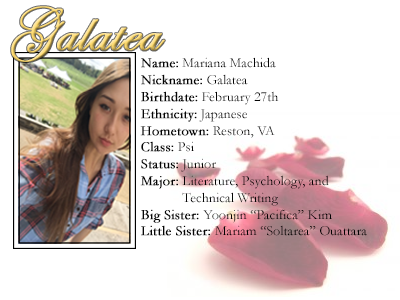
<style>
.page{position:relative;width:400px;height:300px;background:#ffffff}
.page>*{position:absolute;margin:0}
.t1{font:60px "EdwardianScriptITC";font-weight:bold}
.t2{font:14px "Garamond";color:#000000}
.t3{font:14px "Garamond";color:#000000;font-weight:bold}
.t4{font:14px "Garamond";color:#ffffff;font-weight:bold}
</style>
<div class="page">
<p class="t1" style="left:11px;top:6px;width:154px;height:56px">Galatea</p>
<p class="t2" style="left:140px;top:57px;width:227px;height:179px"><span class="t3">Name:</span> Mariana Machida<br><span class="t3">Nickname:</span> Galatea<br><span class="t3">Birthdate:</span> February 27th<br><span class="t3">Ethnicity:</span> Japanese<br><span class="t3">Hometown:</span> Reston, VA<br><span class="t3">Class:</span> Psi<br><span class="t3">Status:</span> Junior<br><span class="t3">Major:</span> Literature, Psychology, and<br><span class="t4">Major: </span>Technical Writing<br><span class="t3">Big Sister: </span>Yoonjin “Pacifica” Kim<br><span class="t3">Little Sister: </span>Mariam “Soltarea” Ouattara</p>
</div>
